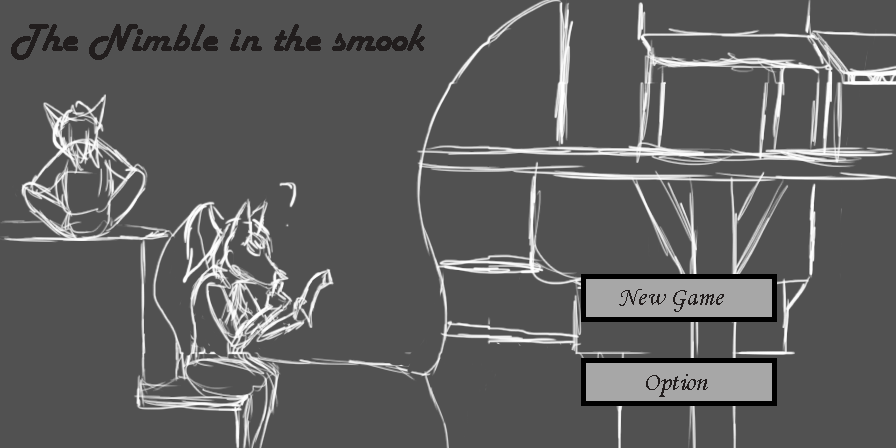
<style>
.page{position:relative;width:896px;height:448px;background:#515151}
.page>*{position:absolute;margin:0}
.t1{font:41.1px "HarlowSolid";color:#211d1d}
.t2{font:26.3px "MonotypeCorsiva";color:#211d1d}
</style>
<div class="page">
<p class="t1" style="left:11px;top:24px;width:414px;height:36px">The Nimble in the smook</p>
<p class="t2" style="left:619px;top:289px;width:105px;height:23px">New Game</p>
<p class="t2" style="left:646px;top:374px;width:62px;height:23px">Option</p>
</div>
